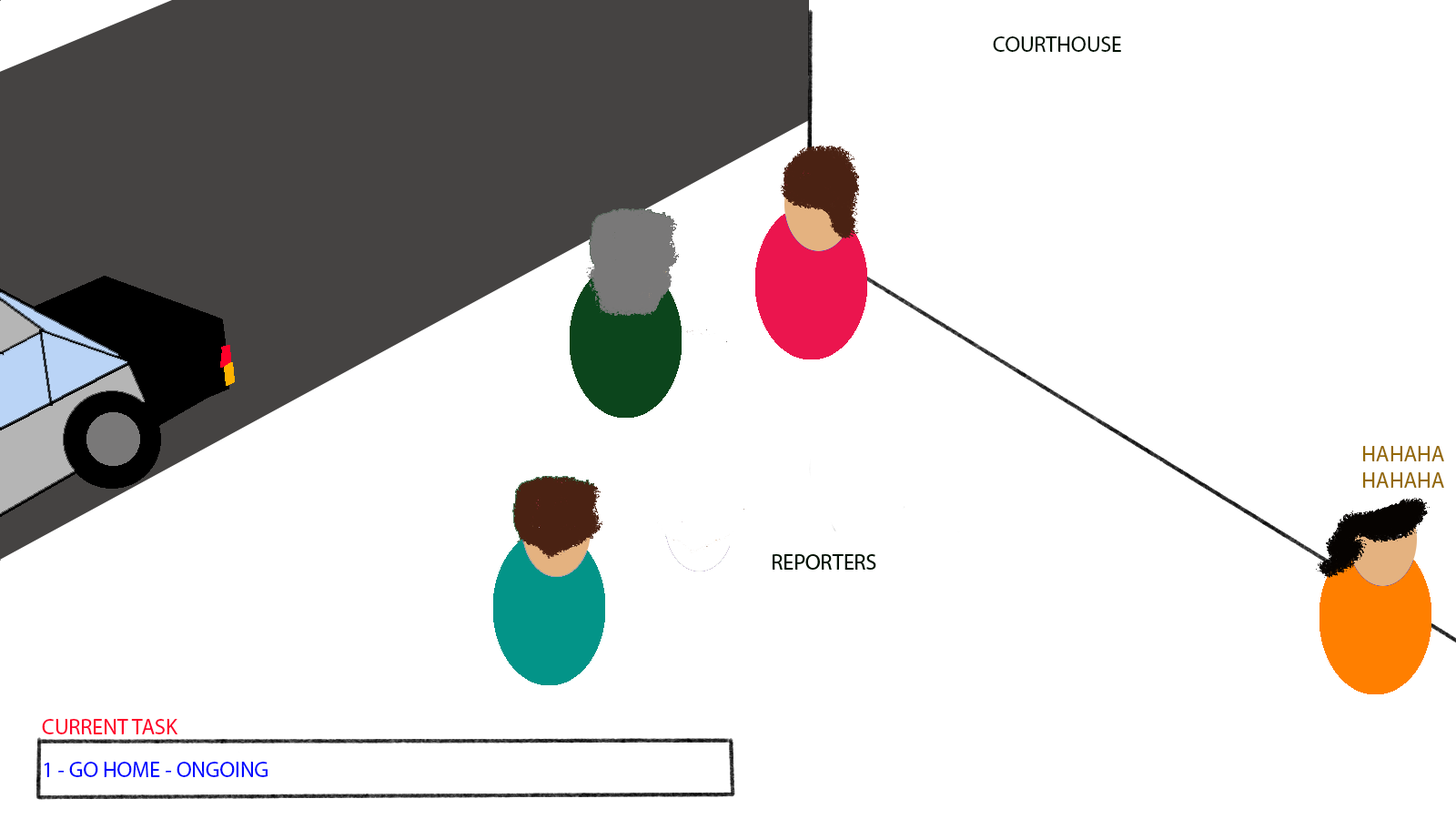
<style>
.page{position:relative;width:1456px;height:819px;background:#ffffff}
.page>*{position:absolute;margin:0}
.t1{font:21.8px "MyriadPro-Regular";color:#011102}
.t2{font:21.8px "MyriadPro-Regular";color:#946903}
.t3{font:21.8px "MyriadPro-Regular";color:#ff002a}
.t4{font:21.8px "MyriadPro-Regular";color:#0008ff}
</style>
<div class="page">
<p class="t1" style="left:993px;top:36px;width:128px;height:16px">COURTHOUSE</p>
<p class="t2" style="left:1363px;top:446px;width:81px;height:42px;text-align:center">HAHAHA<br>HAHAHA</p>
<p class="t3" style="left:42px;top:719px;width:136px;height:15px">CURRENT TASK</p>
<p class="t4" style="left:44px;top:762px;width:224px;height:15px">1 - GO HOME - ONGOING</p>
</div>
